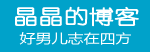
<style>
.page{position:relative;width:150px;height:52px;background:#00a2ca}
.page>*{position:absolute;margin:0}
.t1{font:20px "YouYuan";color:#ffffff;text-transform:uppercase;font-weight:bold;scale:1.23 1}
.t2{font:13px "MicrosoftYaHei";color:#ffffff;scale:1.23 1}
</style>
<div class="page">
<p class="t1" style="left:15px;top:6px;width:124px;height:21px">晶晶的博客</p>
<p class="t2" style="left:19px;top:32px;width:112px;height:13px">好男儿志在四方</p>
</div>
